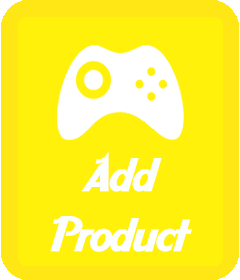
<style>
.page{position:relative;width:240px;height:280px;background:#fff10a}
.page>*{position:absolute;margin:0}
.t1{font:47px "AardvarkCafe";letter-spacing:-0.04em;color:#fdfefe;scale:1.15 1}
</style>
<div class="page">
<p class="t1" style="left:50px;top:152px;width:142px;height:100px;text-align:center">Add<br>Product</p>
</div>
